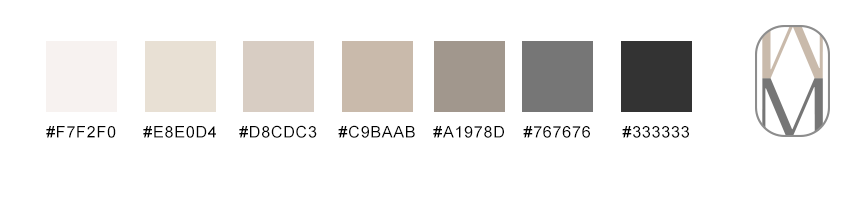
<style>
.page{position:relative;width:850px;height:200px;background:#ffffff}
.page>*{position:absolute;margin:0}
.t1{font:16px "ArialMT";letter-spacing:0.05em;color:#010101;text-transform:uppercase}
.t2{font:16px "ArialMT";letter-spacing:0.05em;color:#010101}
</style>
<div class="page">
<p class="t1" style="left:46px;top:126px;width:70px;height:12px">#f7f2f0</p>
<p class="t2" style="left:143px;top:126px;width:73px;height:12px">#E8E0D4</p>
<p class="t2" style="left:239px;top:125px;width:78px;height:13px">#D8CDC3</p>
<p class="t2" style="left:338px;top:125px;width:77px;height:13px">#C9BAAB</p>
<p class="t1" style="left:433px;top:126px;width:71px;height:12px">#a1978d</p>
<p class="t2" style="left:523px;top:126px;width:67px;height:12px">#767676</p>
<p class="t2" style="left:622px;top:126px;width:67px;height:12px">#333333</p>
</div>
